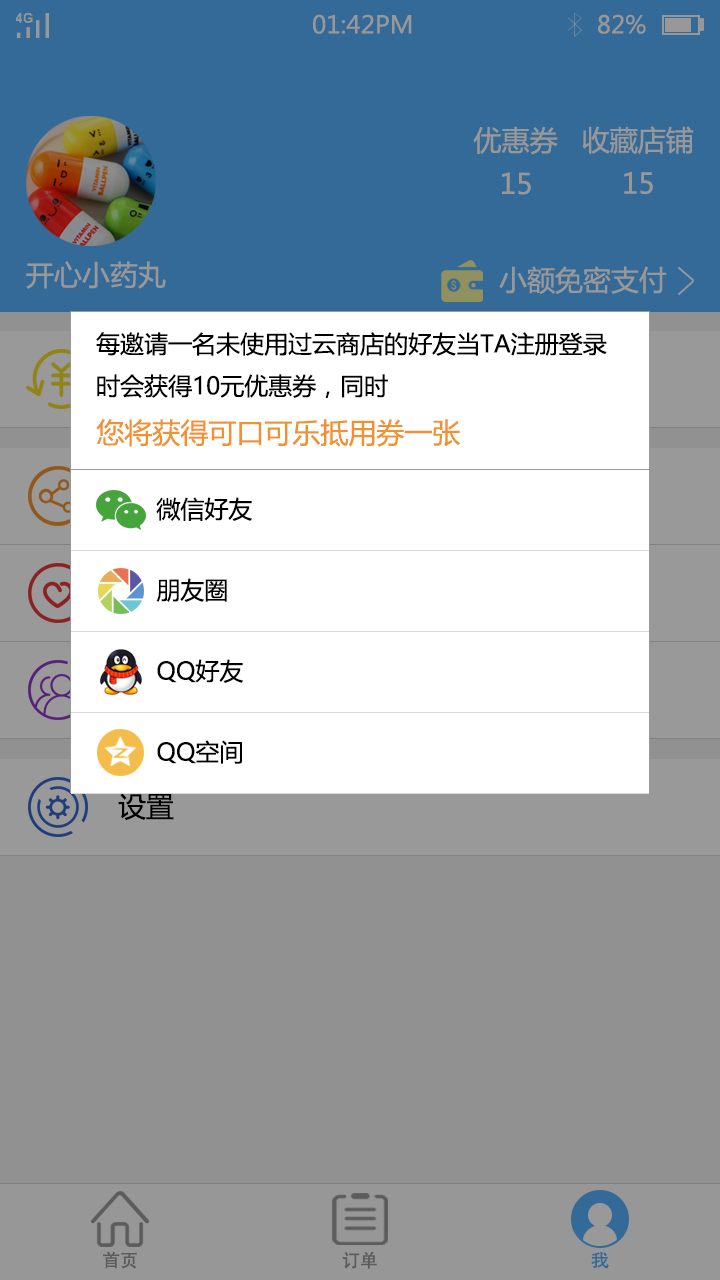
<style>
.page{position:relative;width:720px;height:1280px;background:#ffffff}
.page>*{position:absolute;margin:0}
.t1{font:24px "MicrosoftYaHei";color:#979897}
.t2{font:28.1px "MicrosoftYaHei";color:#999898}
.t3{font:28px "MicrosoftYaHei";color:#999898}
.t4{font:24px "MicrosoftYaHei";color:#000000}
.t5{font:28px "MicrosoftYaHei";color:#f29130}
.t6{font:28px "MicrosoftYaHei";color:#000000}
.t7{font:18px "AdobeHeitiStd-Regular";color:#5c5c5c}
.t8{font:18px "AdobeHeitiStd-Regular";color:#336a98;scale:1.05 1}
</style>
<div class="page">
<p class="t1" style="left:313px;top:14px;width:99px;height:20px">01:42PM</p>
<p class="t1" style="left:598px;top:14px;width:48px;height:20px">82%</p>
<p class="t2" style="left:473px;top:126px;width:85px;height:29px">优惠券</p>
<p class="t3" style="left:582px;top:126px;width:112px;height:28px">收藏店铺</p>
<p class="t2" style="left:502px;top:172px;width:29px;height:23px">15</p>
<p class="t3" style="left:624px;top:171px;width:29px;height:23px">15</p>
<p class="t3" style="left:26px;top:261px;width:140px;height:28px">开心小药丸</p>
<p class="t3" style="left:499px;top:266px;width:168px;height:28px">小额免密支付</p>
<p class="t4" style="left:96px;top:332px;width:511px;height:66px">每邀请一名未使用过云商店的好友当TA注册登录<br>时会获得10元优惠券，同时</p>
<p class="t5" style="left:96px;top:419px;width:364px;height:28px">您将获得可口可乐抵用券一张</p>
<p class="t4" style="left:156px;top:497px;width:96px;height:24px">微信好友</p>
<p class="t4" style="left:156px;top:578px;width:71px;height:24px">朋友圈</p>
<p class="t4" style="left:157px;top:659px;width:87px;height:24px">QQ好友</p>
<p class="t4" style="left:157px;top:740px;width:85px;height:24px">QQ空间</p>
<p class="t6" style="left:118px;top:793px;width:56px;height:28px">设置</p>
<p class="t7" style="left:103px;top:1251px;width:34px;height:18px">首页</p>
<p class="t7" style="left:342px;top:1251px;width:35px;height:18px">订单</p>
<p class="t8" style="left:591px;top:1251px;width:18px;height:18px">我</p>
</div>
